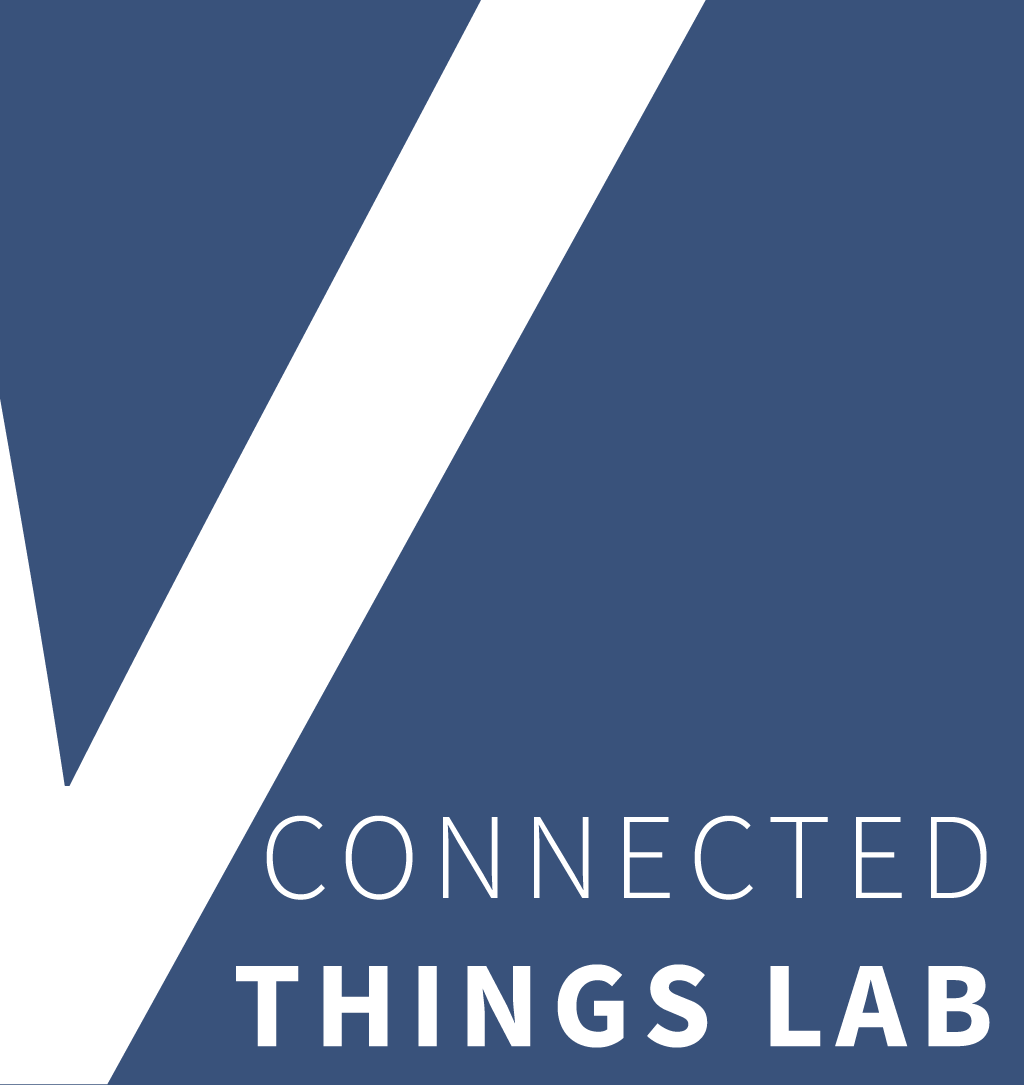
<style>
.page{position:relative;width:1024px;height:1085px;background:#39527b}
.page>*{position:absolute;margin:0}
.t1{font:122.8px "SourceSansPro-Bold";letter-spacing:0.1em;color:#ffffff}
.t2{font:122.8px "Corbel";color:#ffffff}
.t3{font:122.8px "SourceSansPro-Light";letter-spacing:0.1em;color:#ffffff}
</style>
<div class="page">
<p class="t1" style="left:236px;top:815px;width:754px;height:233px;text-align:right"><span class="t2"><br></span><span class="t3">CONNECTED<br></span>THINGS LAB</p>
</div>
